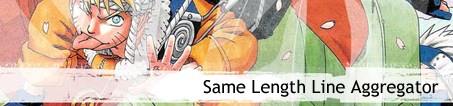
<style>
.page{position:relative;width:453px;height:106px}
.page>*{position:absolute;margin:0}
.t1{font:18px "TrebuchetMS";color:#000000}
</style>
<div class="page">
<p class="t1" style="left:203px;top:79px;width:236px;height:18px">Same Length Line Aggregator</p>
</div>
